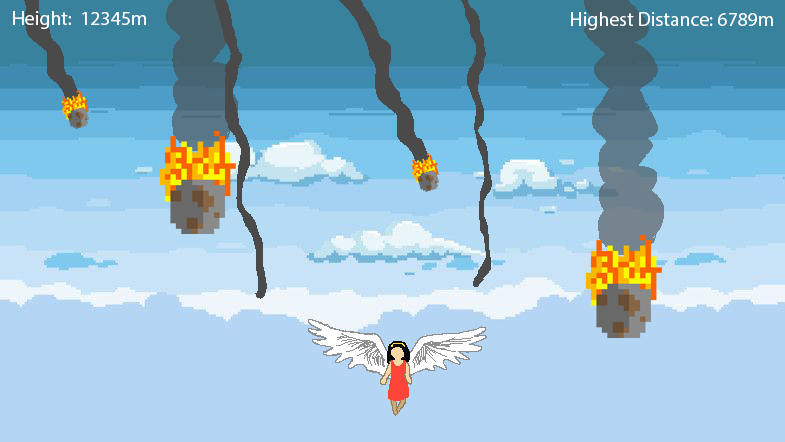
<style>
.page{position:relative;width:785px;height:442px;background:#b4d5f4}
.page>*{position:absolute;margin:0}
.t1{font:19.8px "MyriadPro-Regular";color:#ffffff}
</style>
<div class="page">
<p class="t1" style="left:13px;top:11px;width:133px;height:18px">Height:  12345m</p>
<p class="t1" style="left:571px;top:12px;width:202px;height:18px">Highest Distance: 6789m</p>
</div>
